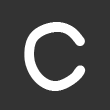
<style>
.page{position:relative;width:110px;height:110px;background:#333333}
.page>*{position:absolute;margin:0}
.t1{font:98px "Bromine";color:#ffffff}
</style>
<div class="page">
<p class="t1" style="left:24px;top:22px;width:62px;height:69px">C</p>
</div>
